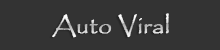
<style>
.page{position:relative;width:220px;height:50px;background:#333333}
.page>*{position:absolute;margin:0}
.t1{font:24px "Papyrus-Regular";font-weight:bold}
</style>
<div class="page">
<p class="t1" style="left:52px;top:13px;width:117px;height:25px">Auto Viral</p>
</div>
